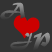
<style>
.page{position:relative;width:52px;height:52px;background:#333333}
.page>*{position:absolute;margin:0}
.t1{font:19px "MaturaMTScriptCapitals";letter-spacing:0.04em}
</style>
<div class="page">
<p class="t1" style="left:0px;top:2px;width:25px;height:18px">A</p>
<p class="t1" style="left:10px;top:32px;width:40px;height:19px">JP</p>
</div>
